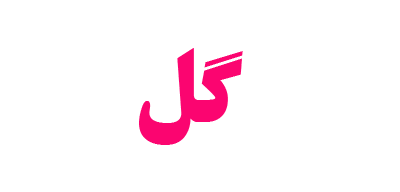
<style>
.page{position:relative;width:400px;height:192px;background:#ffffff}
.page>*{position:absolute;margin:0}
.t1{font:100px "BTitrBold";color:#fc0570}
.t2{font:100px "BTitrBold";color:#ffffff}
</style>
<div class="page">
<p class="t1" style="left:27px;top:48px;width:216px;height:98px">گل <span class="t2">یخ</span></p>
</div>
